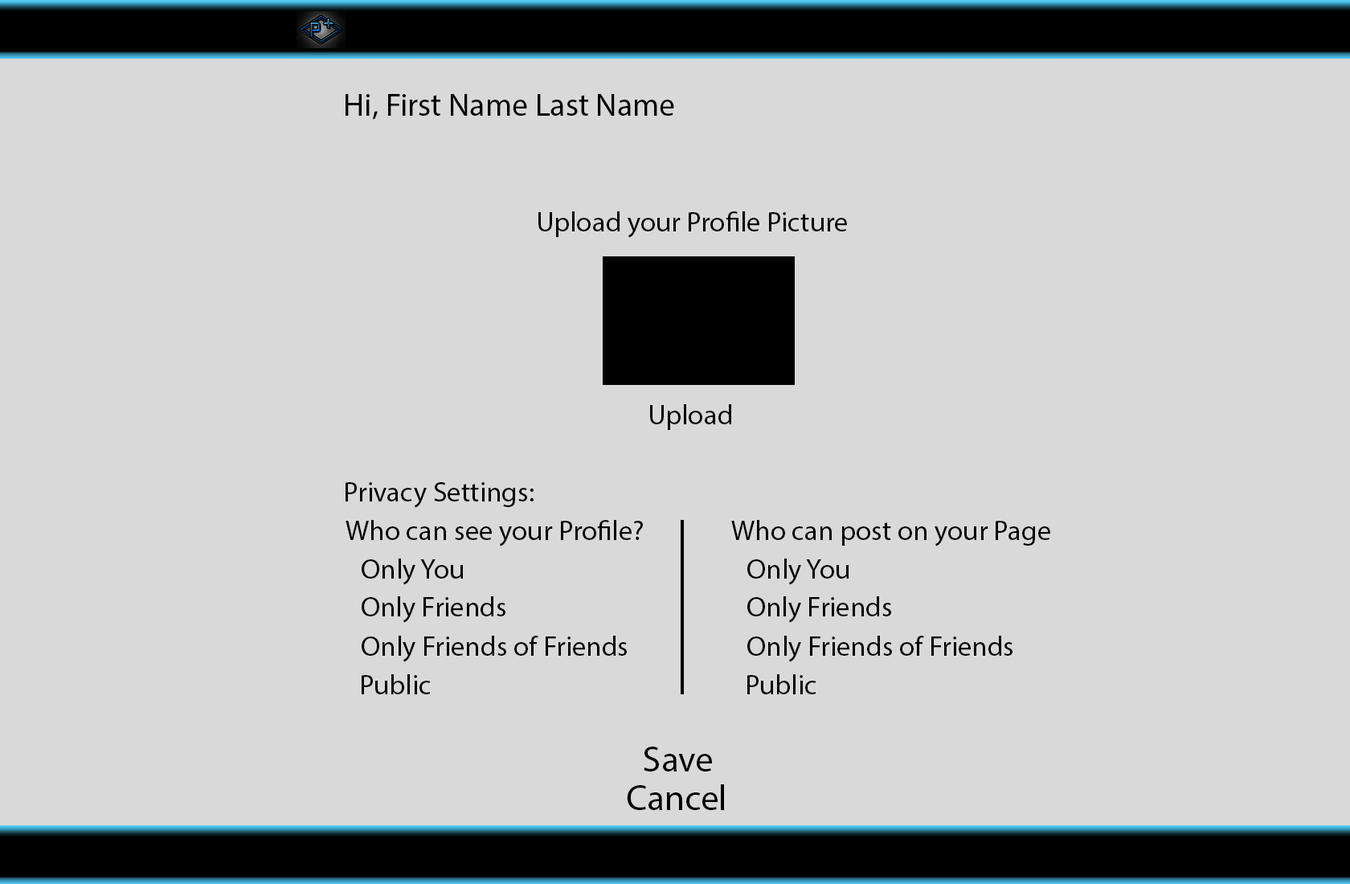
<style>
.page{position:relative;width:1350px;height:884px;background:#d9d9d9}
.page>*{position:absolute;margin:0}
.t1{font:31.8px "MyriadPro-Regular";color:#000000}
.t2{font:27.8px "MyriadPro-Regular";color:#000000}
.t3{font:35.8px "MyriadPro-Regular";color:#000000}
</style>
<div class="page">
<p class="t1" style="left:345px;top:94px;width:329px;height:26px">Hi, First Name Last Name</p>
<p class="t2" style="left:538px;top:211px;width:309px;height:27px">Upload your Profile Picture</p>
<p class="t2" style="left:650px;top:404px;width:81px;height:26px">Upload</p>
<p class="t2" style="left:345px;top:482px;width:188px;height:26px">Privacy Settings:</p>
<p class="t2" style="left:345px;top:520px;width:298px;height:26px">Who can see your Profile?</p>
<p class="t2" style="left:731px;top:520px;width:319px;height:26px">Who can post on your Page</p>
<p class="t2" style="left:361px;top:558px;width:102px;height:27px">Only You</p>
<p class="t2" style="left:747px;top:558px;width:101px;height:27px">Only You</p>
<p class="t2" style="left:361px;top:596px;width:144px;height:27px">Only Friends</p>
<p class="t2" style="left:747px;top:596px;width:144px;height:27px">Only Friends</p>
<p class="t2" style="left:361px;top:635px;width:266px;height:27px">Only Friends of Friends</p>
<p class="t2" style="left:747px;top:635px;width:265px;height:27px">Only Friends of Friends</p>
<p class="t2" style="left:361px;top:674px;width:70px;height:20px">Public</p>
<p class="t2" style="left:747px;top:674px;width:69px;height:20px">Public</p>
<p class="t3" style="left:643px;top:746px;width:69px;height:25px">Save</p>
<p class="t3" style="left:627px;top:784px;width:97px;height:26px">Cancel</p>
</div>
